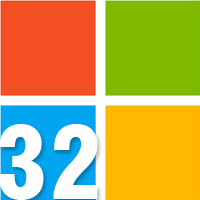
<style>
.page{position:relative;width:200px;height:200px}
.page>*{position:absolute;margin:0}
.t1{font:97.5px "Swiss721BT-BlackCondensed";letter-spacing:0.026em;color:#ffffff}
</style>
<div class="page">
<p class="t1" style="left:0px;top:124px;width:98px;height:76px">32</p>
</div>
